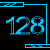
<style>
.page{position:relative;width:50px;height:50px;background:#000000}
.page>*{position:absolute;margin:0}
.t1{font:20.8px "ABitEmpty";color:#00ccff}
</style>
<div class="page">
<p class="t1" style="left:6px;top:16px;width:39px;height:19px">128</p>
</div>
